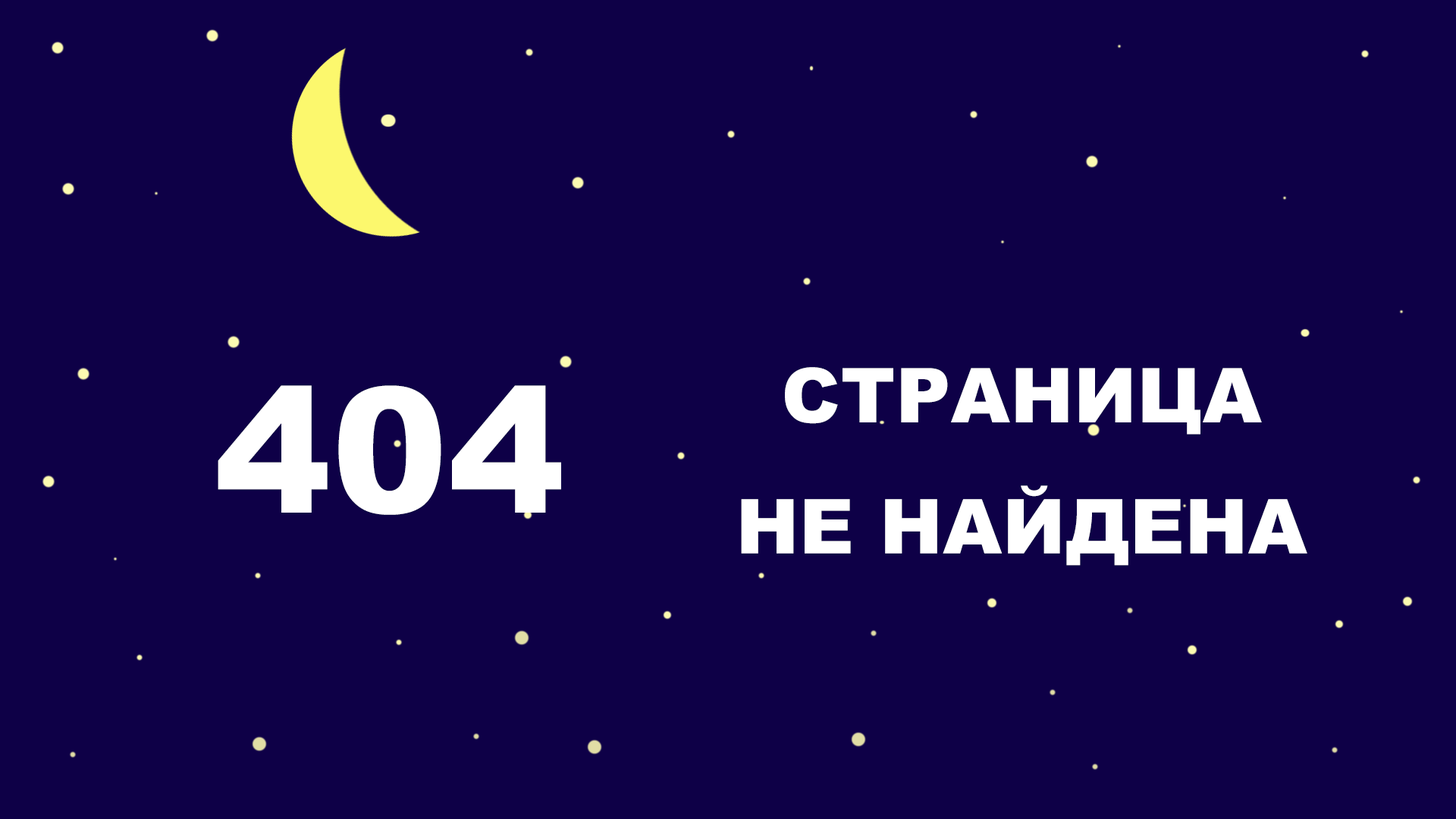
<style>
.page{position:relative;width:1456px;height:819px;background:#0e0047}
.page>*{position:absolute;margin:0}
.t1{font:75.8px/21.8px "Arial-Black";letter-spacing:0.005em;color:#ffffff}
.t2{font:174.4px "Arial-Black";letter-spacing:0.005em;color:#ffffff}
</style>
<div class="page">
<p class="t1" style="left:741px;top:367px;width:566px;height:199px;text-align:center">СТРАНИЦА<br><br><br><br><br><br>НЕ НАЙДЕНА</p>
<p class="t2" style="left:218px;top:385px;width:343px;height:130px">404</p>
</div>
